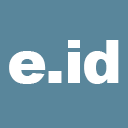
<style>
.page{position:relative;width:128px;height:128px;background:#59869b}
.page>*{position:absolute;margin:0}
.t1{font:60px "Arial-Black";letter-spacing:-0.025em;color:#ffffff}
</style>
<div class="page">
<p class="t1" style="left:9px;top:40px;width:110px;height:44px">e.id</p>
</div>
